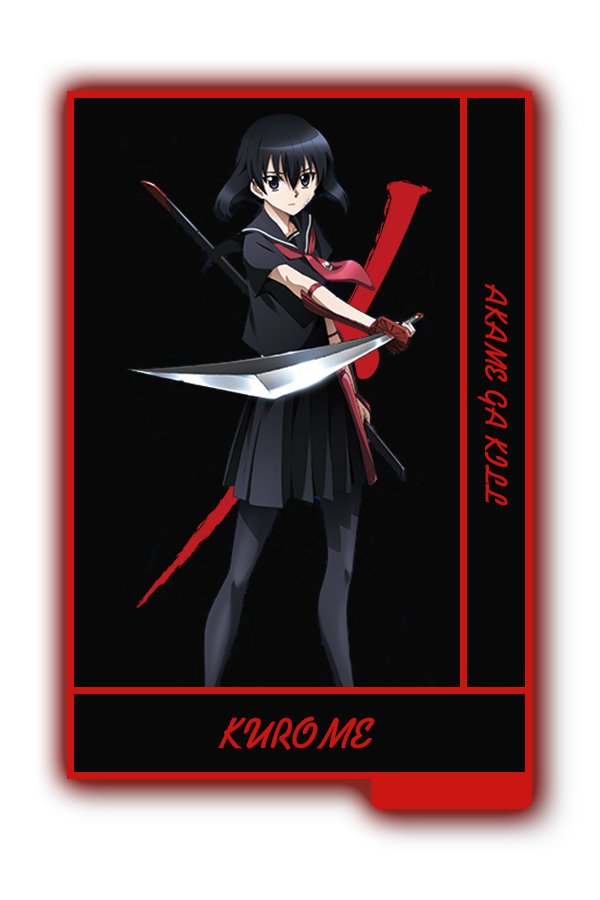
<style>
.page{position:relative;width:600px;height:900px;background:#080808}
.page>*{position:absolute;margin:0}
.t1{font:31.2px "Alako-Bold";color:#cb1511}
.t2{font:43.2px "Alako-Bold";color:#cb1511}
</style>
<div class="page">
<p class="t1" style="left:477px;top:283px;width:31px;height:223px;rotate:90deg">AKAME GA KILL</p>
<p class="t2" style="left:218px;top:716px;width:157px;height:34px">KUROME</p>
</div>
